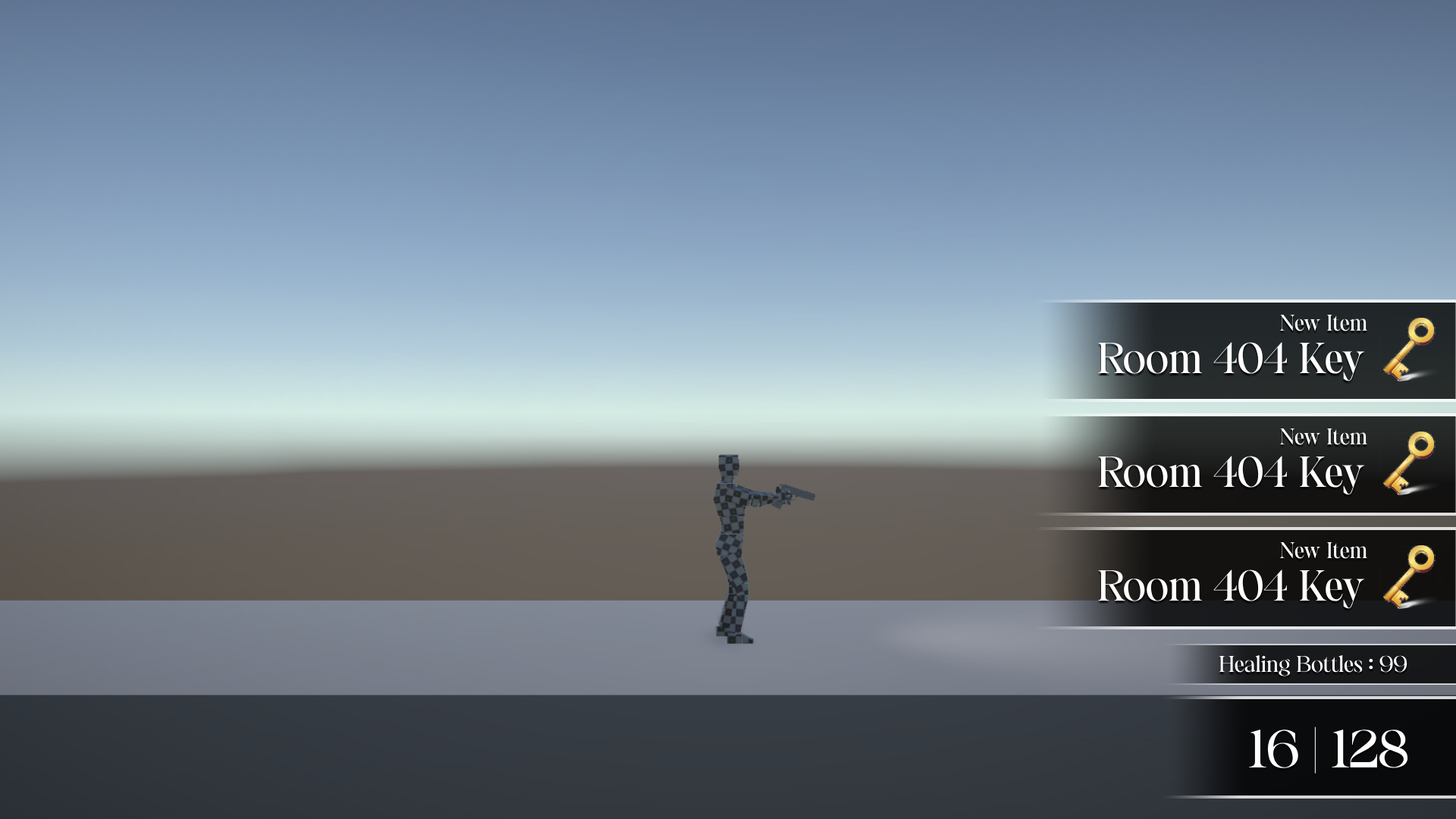
<style>
.page{position:relative;width:1456px;height:819px}
.page>*{position:absolute;margin:0}
.t1{font:22.7px "Gamilia-Regular";color:#ffffff}
.t2{font:43.2px "Gamilia-Regular";color:#ffffff}
.t3{font:53.1px "Gamilia-Regular";color:#ffffff}
</style>
<div class="page">
<p class="t1" style="left:1279px;top:315px;width:88px;height:16px">New Item</p>
<p class="t2" style="left:1098px;top:342px;width:266px;height:39px">Room 404 Key</p>
<p class="t1" style="left:1279px;top:428px;width:88px;height:17px">New Item</p>
<p class="t2" style="left:1098px;top:456px;width:266px;height:39px">Room 404 Key</p>
<p class="t1" style="left:1279px;top:542px;width:88px;height:17px">New Item</p>
<p class="t2" style="left:1098px;top:570px;width:266px;height:39px">Room 404 Key</p>
<p class="t1" style="left:1219px;top:655px;width:188px;height:21px">Healing Bottles : 99</p>
<p class="t3" style="left:1249px;top:726px;width:159px;height:47px">16 | 128</p>
</div>
